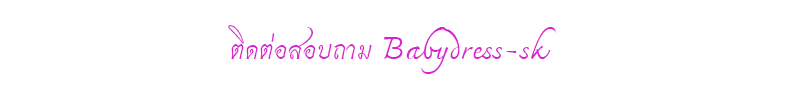
<style>
.page{position:relative;width:800px;height:110px;background:#ffffff}
.page>*{position:absolute;margin:0}
.t1{font:36px "THCharmonman";color:#d822cd}
</style>
<div class="page">
<p class="t1" style="left:228px;top:25px;width:328px;height:49px">ติดต่อสอบถาม Babydress-sk</p>
</div>
